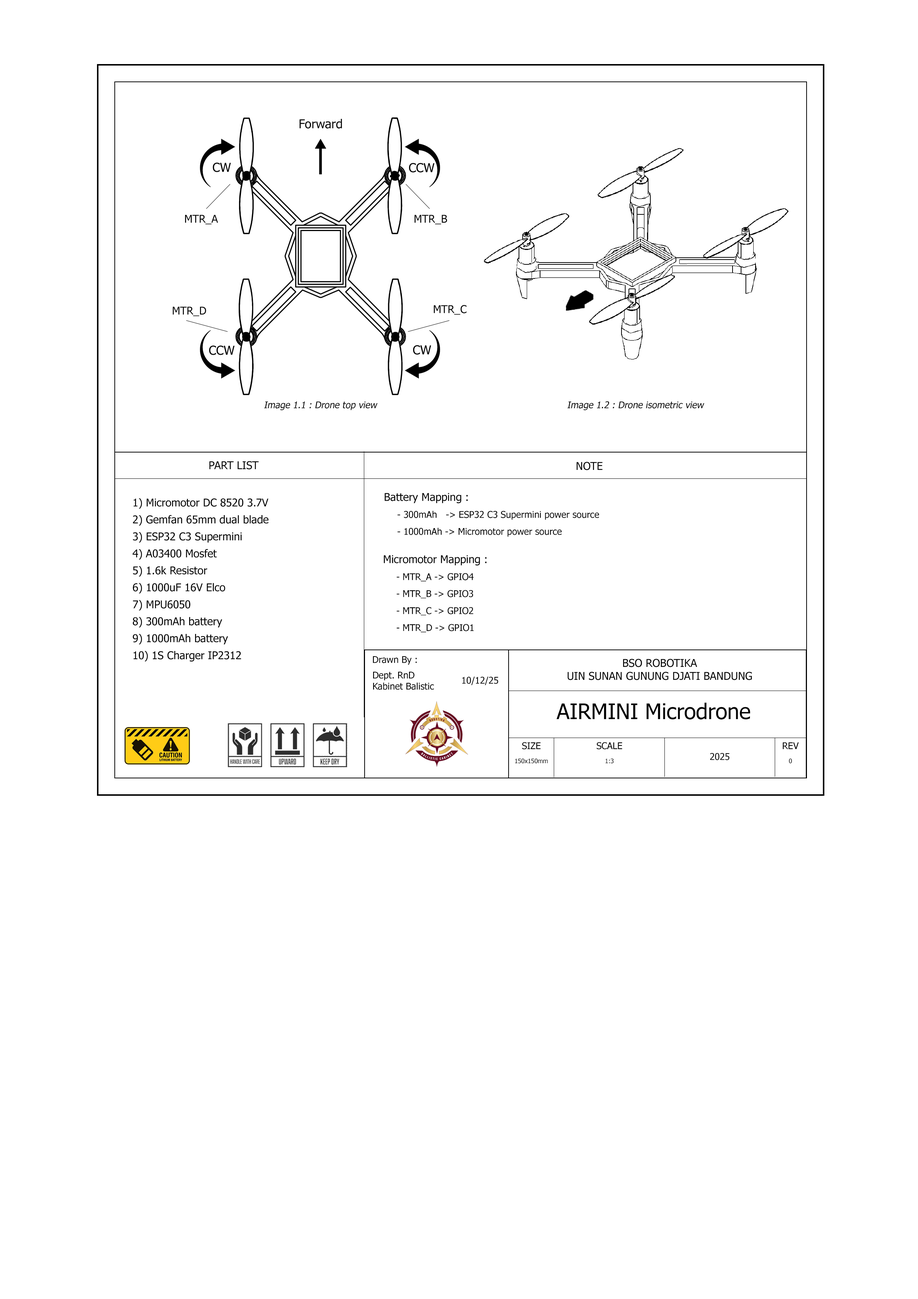
<style>
.page{position:relative;width:918px;height:1299px;background:#ffffff}
.page>*{position:absolute;margin:0}
.t1{font:12.3px "Tahoma";color:#000000}
.t2{font:10.8px "Tahoma";color:#000000}
.t3{font:9.3px "Tahoma";color:#000000;font-style:italic}
.t4{font:10.8px/17px "Tahoma";color:#000000}
.t5{font:9.3px/17px "Tahoma";color:#000000}
.t6{font:9.3px "Tahoma";color:#000000}
.t7{font:21.6px "Tahoma";color:#000000}
.t8{font:6.2px "Tahoma";color:#000000}
</style>
<div class="page">
<p class="t1" style="left:300px;top:119px;width:42px;height:9px">Forward</p>
<p class="t2" style="left:185px;top:215px;width:33px;height:9px">MTR_A</p>
<p class="t2" style="left:415px;top:215px;width:32px;height:9px">MTR_B</p>
<p class="t2" style="left:434px;top:305px;width:33px;height:10px">MTR_C</p>
<p class="t2" style="left:173px;top:307px;width:33px;height:9px">MTR_D</p>
<p class="t3" style="left:264px;top:401px;width:114px;height:9px">Image 1.1 : Drone top view</p>
<p class="t3" style="left:568px;top:401px;width:137px;height:9px">Image 1.2 : Drone isometric view</p>
<p class="t2" style="left:209px;top:461px;width:50px;height:8px">PART LIST</p>
<p class="t2" style="left:576px;top:462px;width:27px;height:8px">NOTE</p>
<p class="t4" style="left:133px;top:498px;width:136px;height:164px">1) Micromotor DC 8520 3.7V<br>2) Gemfan 65mm dual blade <br>3) ESP32 C3 Supermini<br>4) A03400 Mosfet <br>5) 1.6k Resistor<br>6) 1000uF 16V Elco <br>7) MPU6050<br>8) 300mAh battery <br>9) 1000mAh battery<br>10) 1S Charger IP2312</p>
<p class="t5" style="left:385px;top:493px;width:214px;height:44px"><span class="t4">Battery Mapping :<br></span> - 300mAh   -&gt; ESP32 C3 Supermini power source<br> - 1000mAh -&gt; Micromotor power source</p>
<p class="t5" style="left:384px;top:555px;width:103px;height:77px"><span class="t4">Micromotor Mapping :<br> </span>- MTR_A -&gt; GPIO4<br> - MTR_B -&gt; GPIO3<br> - MTR_C -&gt; GPIO2<br> - MTR_D -&gt; GPIO1</p>
<p class="t6" style="left:373px;top:656px;width:44px;height:9px">Drawn By :</p>
<p class="t2" style="left:568px;top:659px;width:184px;height:21px;text-align:center">BSO ROBOTIKA<br>UIN SUNAN GUNUNG DJATI BANDUNG</p>
<p class="t6" style="left:373px;top:672px;width:61px;height:18px">Dept. RnD <br>Kabinet Balistic</p>
<p class="t6" style="left:462px;top:676px;width:36px;height:9px">10/12/25</p>
<p class="t7" style="left:556px;top:702px;width:194px;height:17px">AIRMINI Microdrone</p>
<p class="t6" style="left:522px;top:742px;width:19px;height:7px">SIZE</p>
<p class="t6" style="left:597px;top:742px;width:25px;height:7px">SCALE</p>
<p class="t6" style="left:783px;top:742px;width:16px;height:7px">REV</p>
<p class="t8" style="left:515px;top:758px;width:33px;height:5px">150x150mm</p>
<p class="t8" style="left:606px;top:758px;width:8px;height:5px">1:3</p>
<p class="t6" style="left:710px;top:753px;width:20px;height:7px">2025</p>
<p class="t8" style="left:789px;top:758px;width:3px;height:5px">0</p>
</div>
